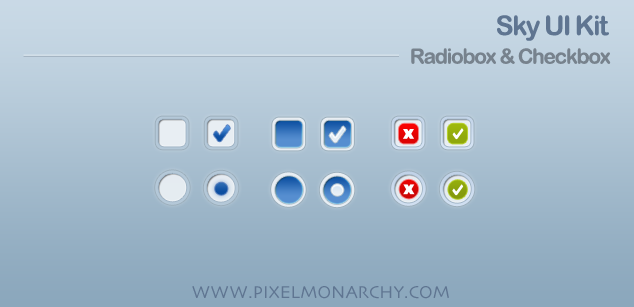
<style>
.page{position:relative;width:634px;height:307px}
.page>*{position:absolute;margin:0}
.t1{font:27px "ArialRoundedMTBold";letter-spacing:-0.06em;color:#5f7591}
.t2{font:20.9px "ArialRoundedMTBold";letter-spacing:-0.06em;color:#77828d}
.t3{font:18.1px "Skia-Regular";color:#5f7591;text-transform:uppercase}
</style>
<div class="page">
<p class="t1" style="left:497px;top:15px;width:112px;height:26px">Sky UI Kit</p>
<p class="t2" style="left:411px;top:48px;width:200px;height:16px">Radiobox &amp; Checkbox</p>
<p class="t3" style="left:192px;top:286px;width:257px;height:13px">www.pixelmonarchy.com</p>
</div>
